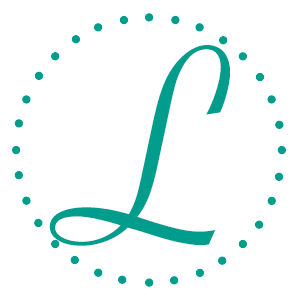
<style>
.page{position:relative;width:300px;height:300px;background:#ffffff}
.page>*{position:absolute;margin:0}
.t1{font:300px "SavoyeLetPlain";color:#009d8c}
</style>
<div class="page">
<p class="t1" style="left:49px;top:45px;width:181px;height:201px">L</p>
</div>
